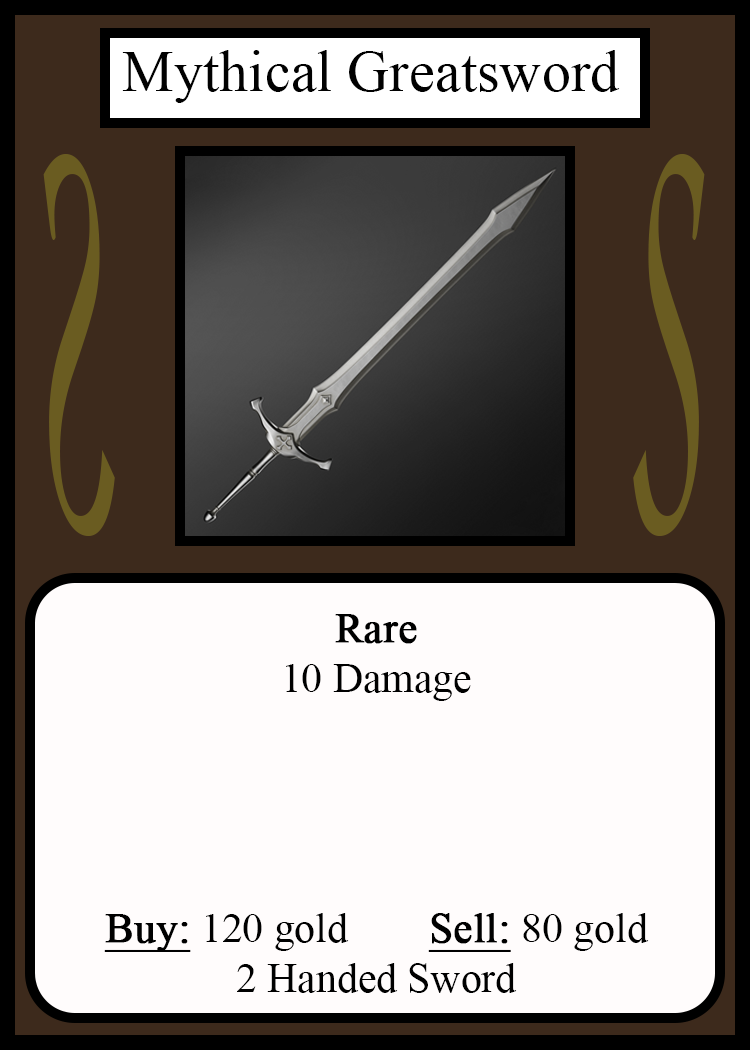
<style>
.page{position:relative;width:750px;height:1050px;background:#fffcfc}
.page>*{position:absolute;margin:0}
.t1{font:58.3px "TimesNewRomanPSMT";color:#010101}
.t2{font:548.5px "Apple-Chancery";color:#6a5c21;scale:0.27 1}
.t3{font:548.2px "Apple-Chancery";color:#6a5c21;scale:0.27 1}
.t4{font:41.7px "TimesNewRomanPSMT";color:#000000}
.t5{font:41.7px "TimesNewRomanPSMT";color:#000000;font-weight:bold}
.t6{font:41.7px "TimesNewRomanPSMT";color:#000000;font-weight:bold;text-decoration:underline}
</style>
<div class="page">
<p class="t1" style="left:122px;top:50px;width:498px;height:53px">Mythical Greatsword</p>
<p class="t2" style="left:43px;top:154px;width:72px;height:382px;rotate:180deg">S</p>
<p class="t3" style="left:633px;top:154px;width:72px;height:382px">S</p>
<p class="t4" style="left:104px;top:614px;width:545px;height:379px;text-align:center"><span class="t5">Rare<br></span>10 Damage<br><br><br><br><br><span class="t6">Buy:</span> 120 gold   <span class="t6">Sell:</span> 80 gold<br>2 Handed Sword</p>
</div>
